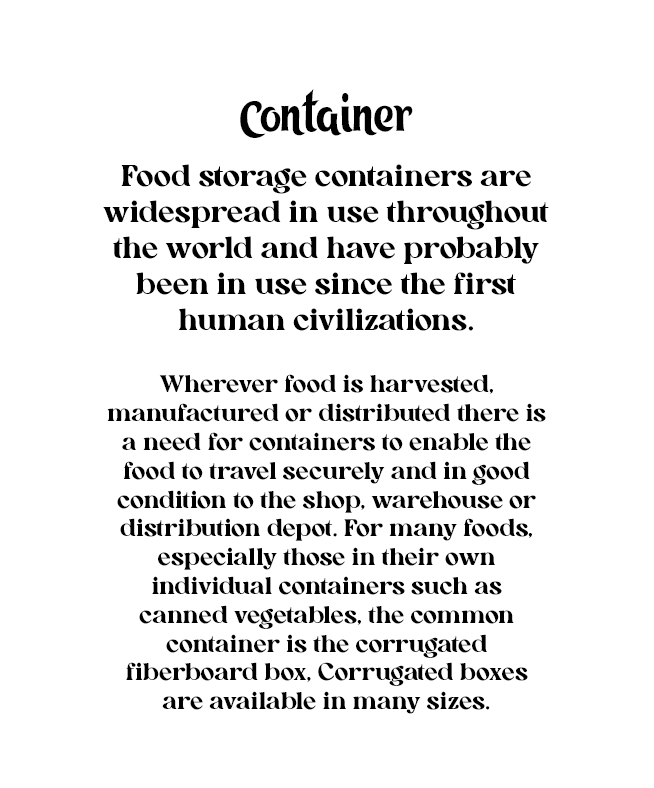
<style>
.page{position:relative;width:654px;height:788px;background:#ffffff}
.page>*{position:absolute;margin:0}
.t1{font:48px "KZ_Tangak-Regular";color:#000000}
.t2{font:30px "AllenoireFreePersonal-Regular";color:#000000}
.t3{font:24px "AllenoireFreePersonal-Regular";color:#000000}
</style>
<div class="page">
<p class="t1" style="left:240px;top:89px;width:173px;height:49px">Container</p>
<p class="t2" style="left:103px;top:164px;width:446px;height:167px;text-align:center">Food storage containers are widespread in use throughout the world and have probably been in use since the first human civilizations.</p>
<p class="t3" style="left:107px;top:374px;width:439px;height:340px;text-align:center">Wherever food is harvested, manufactured or distributed there is a need for containers to enable the food to travel securely and in good condition to the shop, warehouse or distribution depot. For many foods, especially those in their own individual containers such as canned vegetables, the common container is the corrugated fiberboard box, Corrugated boxes are available in many sizes.</p>
</div>
